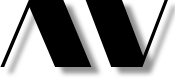
<style>
.page{position:relative;width:175px;height:78px;background:#000000}
.page>*{position:absolute;margin:0}
.t1{font:84.3px "20db";color:#000000}
</style>
<div class="page">
<p class="t1" style="left:0px;top:0px;width:169px;height:67px">AV</p>
</div>
